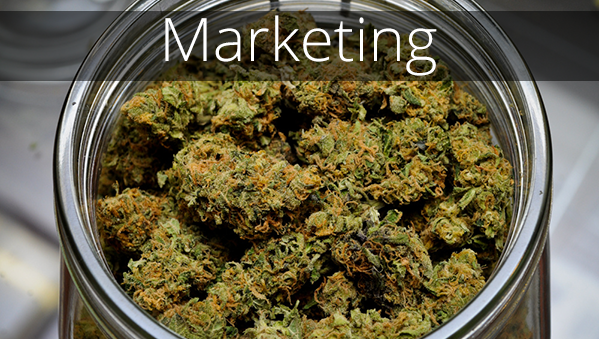
<style>
.page{position:relative;width:599px;height:339px}
.page>*{position:absolute;margin:0}
.t1{font:60px "OpenSans-Light";color:#ffffff;scale:1.03 1}
</style>
<div class="page">
<p class="t1" style="left:165px;top:15px;width:272px;height:61px">Marketing</p>
</div>
